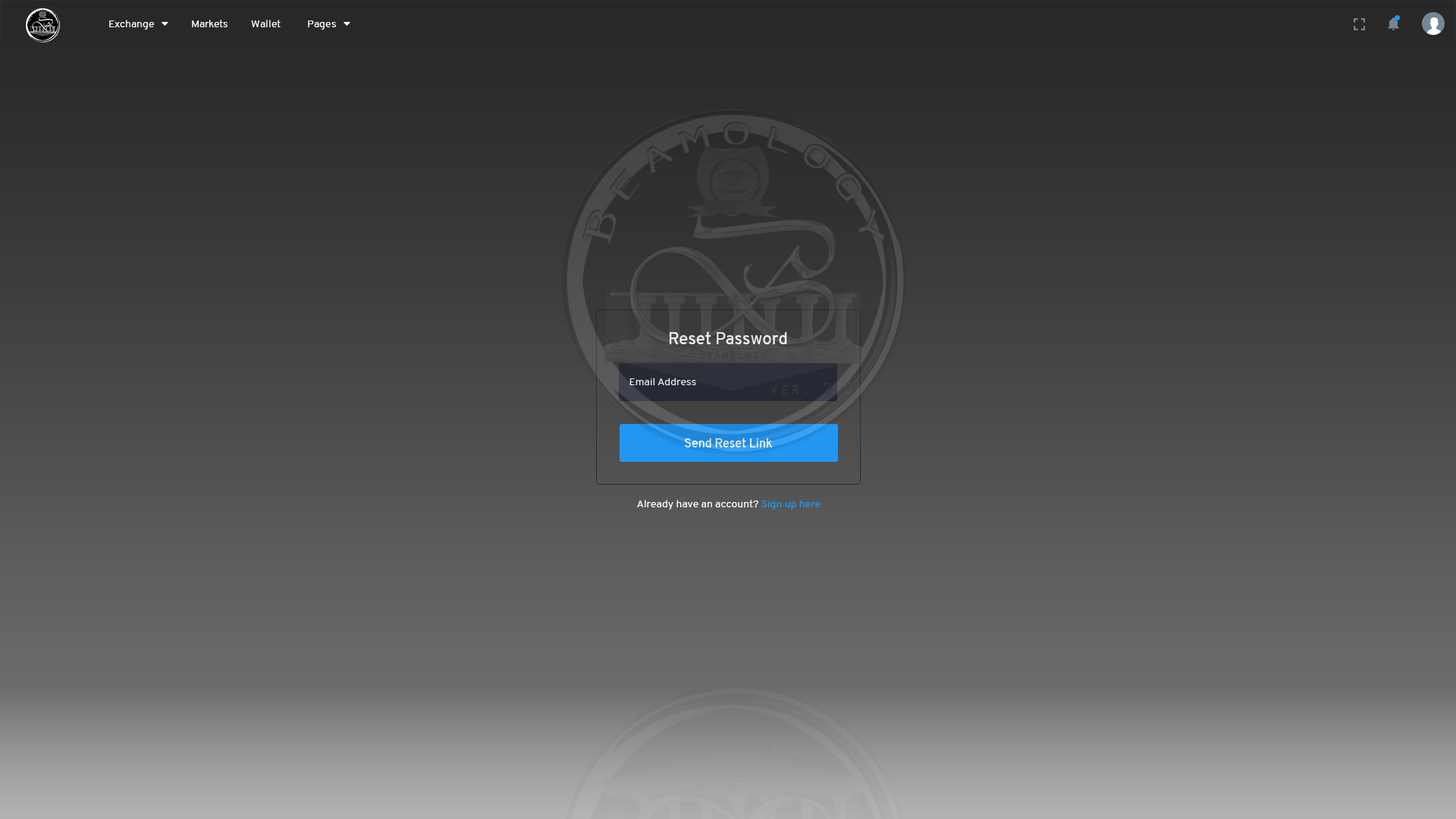
<style>
.page{position:relative;width:1456px;height:819px}
.page>*{position:absolute;margin:0}
.t1{font:16.7px "Overpass-SemiBold";color:#ffffff}
.t2{font:10.6px "Overpass-Regular";color:#e5e5e5}
.t3{font:12.1px "Overpass-SemiBold";color:#ebebeb}
.t4{font:10.6px "Overpass-Regular";color:#ffffff}
.t5{font:10.6px "Overpass-Regular";color:#2196f3}
</style>
<div class="page">
<p class="t1" style="left:670px;top:331px;width:117px;height:13px">Reset Password</p>
<p class="t2" style="left:629px;top:378px;width:67px;height:7px">Email Address</p>
<p class="t3" style="left:685px;top:438px;width:88px;height:9px">Send Reset Link</p>
<p class="t4" style="left:637px;top:500px;width:184px;height:10px">Already have an account? <span class="t5">Sign up here</span></p>
</div>
